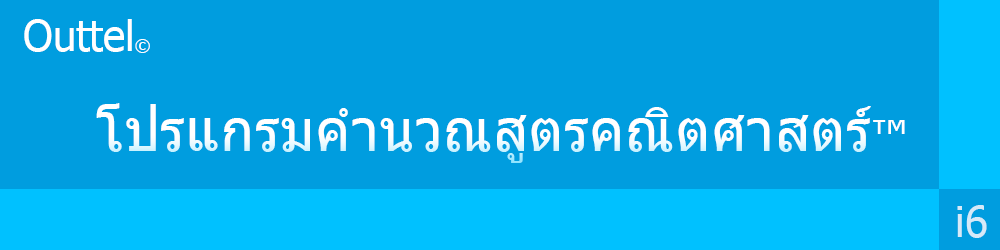
<style>
.page{position:relative;width:1000px;height:250px;background:#009ddf}
.page>*{position:absolute;margin:0}
.t1{font:41.7px "Tahoma";color:#ffffff}
.t2{font:16.7px "Tahoma";color:#ffffff}
.t3{font:58.3px "Tahoma";color:#ffffff}
.t4{font:41.7px "Tahoma";color:#d6eaf8}
</style>
<div class="page">
<p class="t1" style="left:24px;top:19px;width:126px;height:34px">Outtel<span class="t2">©</span></p>
<p class="t3" style="left:96px;top:103px;width:809px;height:60px">โปรแกรมคำนวณสูตรคณิตศาสตร์<span class="t1">™</span></p>
<p class="t4" style="left:957px;top:205px;width:30px;height:33px">i6</p>
</div>
